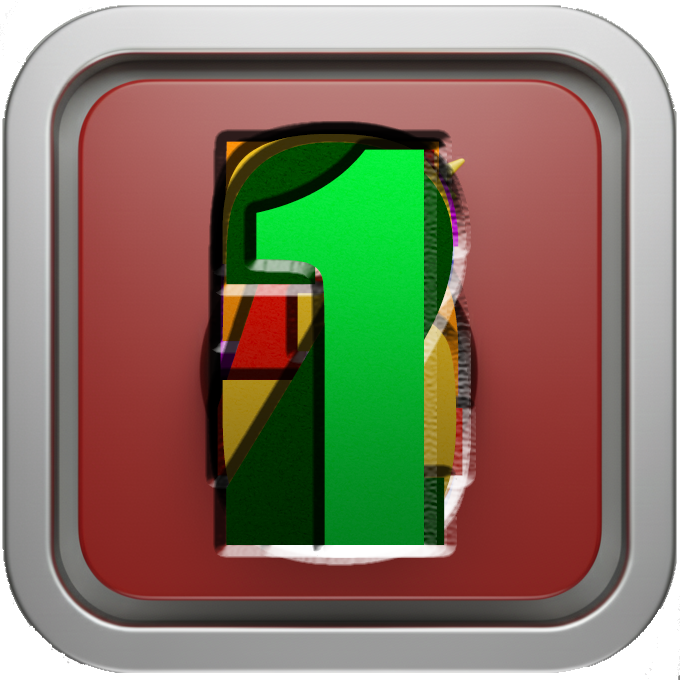
<style>
.page{position:relative;width:680px;height:680px}
.page>*{position:absolute;margin:0}
.t1{font:500px "Impact"}
</style>
<div class="page">
<p class="t1" style="left:217px;top:149px;width:246px;height:396px">4</p>
<p class="t1" style="left:226px;top:142px;width:227px;height:403px">2</p>
<p class="t1" style="left:244px;top:149px;width:190px;height:396px">7</p>
<p class="t1" style="left:256px;top:149px;width:168px;height:396px">1</p>
</div>
